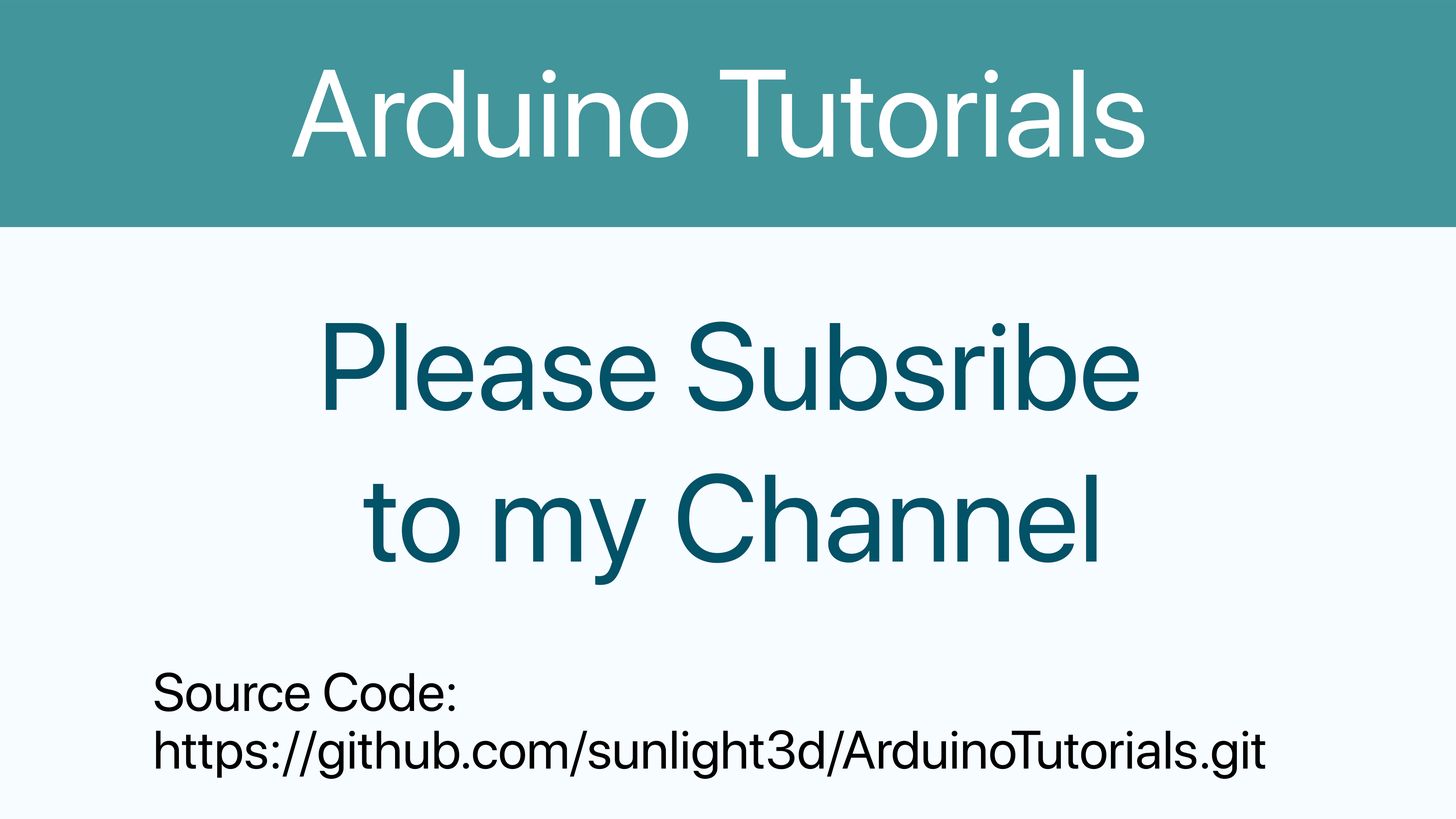
<style>
.page{position:relative;width:1456px;height:819px;background:#f6fcff}
.page>*{position:absolute;margin:0}
.t1{font:123.2px "SFProDisplay-Regular";color:#ffffff}
.t2{font:123.2px/37.9px "SFProDisplay-Regular";color:#025268}
.t3{font:53.7px/57.6px "SFProDisplay-Regular";color:#000000}
</style>
<div class="page">
<p class="t1" style="left:292px;top:70px;width:852px;height:88px">Arduino Tutorials</p>
<p class="t2" style="left:326px;top:322px;width:813px;height:263px;text-align:center">Please Subsribe <br><br><br><br>to my Channel</p>
<p class="t3" style="left:154px;top:672px;width:1111px;height:107px">Source Code:<br>https://github.com/sunlight3d/ArduinoTutorials.git</p>
</div>
